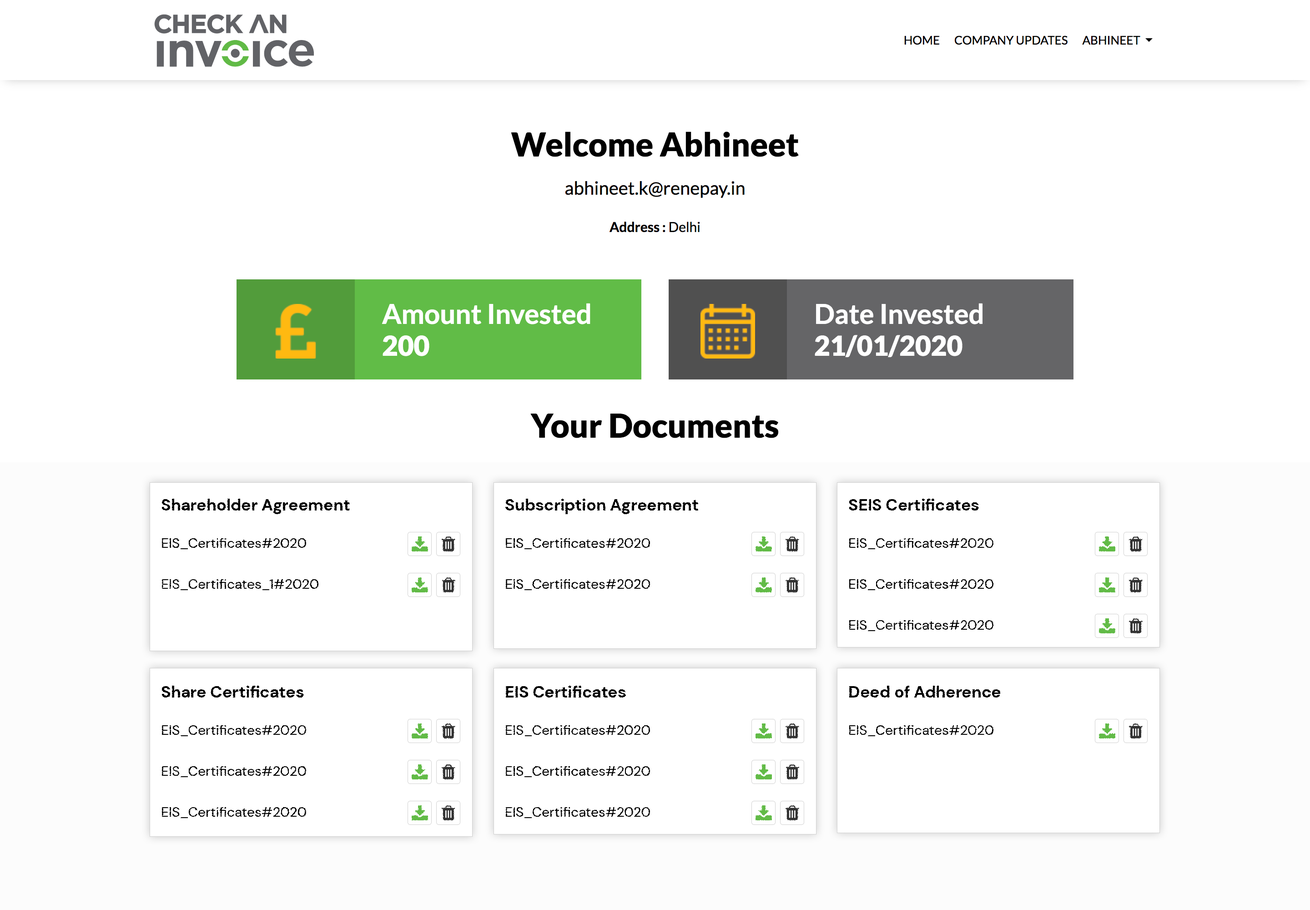
<style>
.page{position:relative;width:1310px;height:910px;background:#ffffff}
.page>*{position:absolute;margin:0}
.t1{font:16.4px "DMSans-Bold";color:#000000}
.t2{font:13.6px "DMSans-Regular";color:#000000}
</style>
<div class="page">
<p class="t1" style="left:162px;top:499px;width:188px;height:15px">Shareholder Agreement</p>
<p class="t1" style="left:505px;top:499px;width:193px;height:15px">Subscription Agreement</p>
<p class="t1" style="left:849px;top:499px;width:130px;height:12px">SEIS Certificates</p>
<p class="t2" style="left:162px;top:538px;width:144px;height:11px">EIS_Certificates#2020</p>
<p class="t2" style="left:506px;top:538px;width:144px;height:11px">EIS_Certificates#2020</p>
<p class="t2" style="left:849px;top:538px;width:145px;height:11px">EIS_Certificates#2020</p>
<p class="t2" style="left:162px;top:579px;width:156px;height:11px">EIS_Certificates_1#2020</p>
<p class="t2" style="left:506px;top:579px;width:144px;height:11px">EIS_Certificates#2020</p>
<p class="t2" style="left:849px;top:579px;width:145px;height:11px">EIS_Certificates#2020</p>
<p class="t2" style="left:849px;top:620px;width:145px;height:11px">EIS_Certificates#2020</p>
<p class="t1" style="left:162px;top:686px;width:142px;height:12px">Share Certificates</p>
<p class="t1" style="left:506px;top:686px;width:120px;height:12px">EIS Certificates</p>
<p class="t1" style="left:849px;top:686px;width:152px;height:12px">Deed of Adherence</p>
<p class="t2" style="left:162px;top:725px;width:144px;height:11px">EIS_Certificates#2020</p>
<p class="t2" style="left:506px;top:725px;width:144px;height:11px">EIS_Certificates#2020</p>
<p class="t2" style="left:849px;top:725px;width:145px;height:11px">EIS_Certificates#2020</p>
<p class="t2" style="left:162px;top:766px;width:144px;height:11px">EIS_Certificates#2020</p>
<p class="t2" style="left:506px;top:766px;width:144px;height:11px">EIS_Certificates#2020</p>
<p class="t2" style="left:162px;top:807px;width:144px;height:11px">EIS_Certificates#2020</p>
<p class="t2" style="left:506px;top:807px;width:144px;height:11px">EIS_Certificates#2020</p>
</div>
